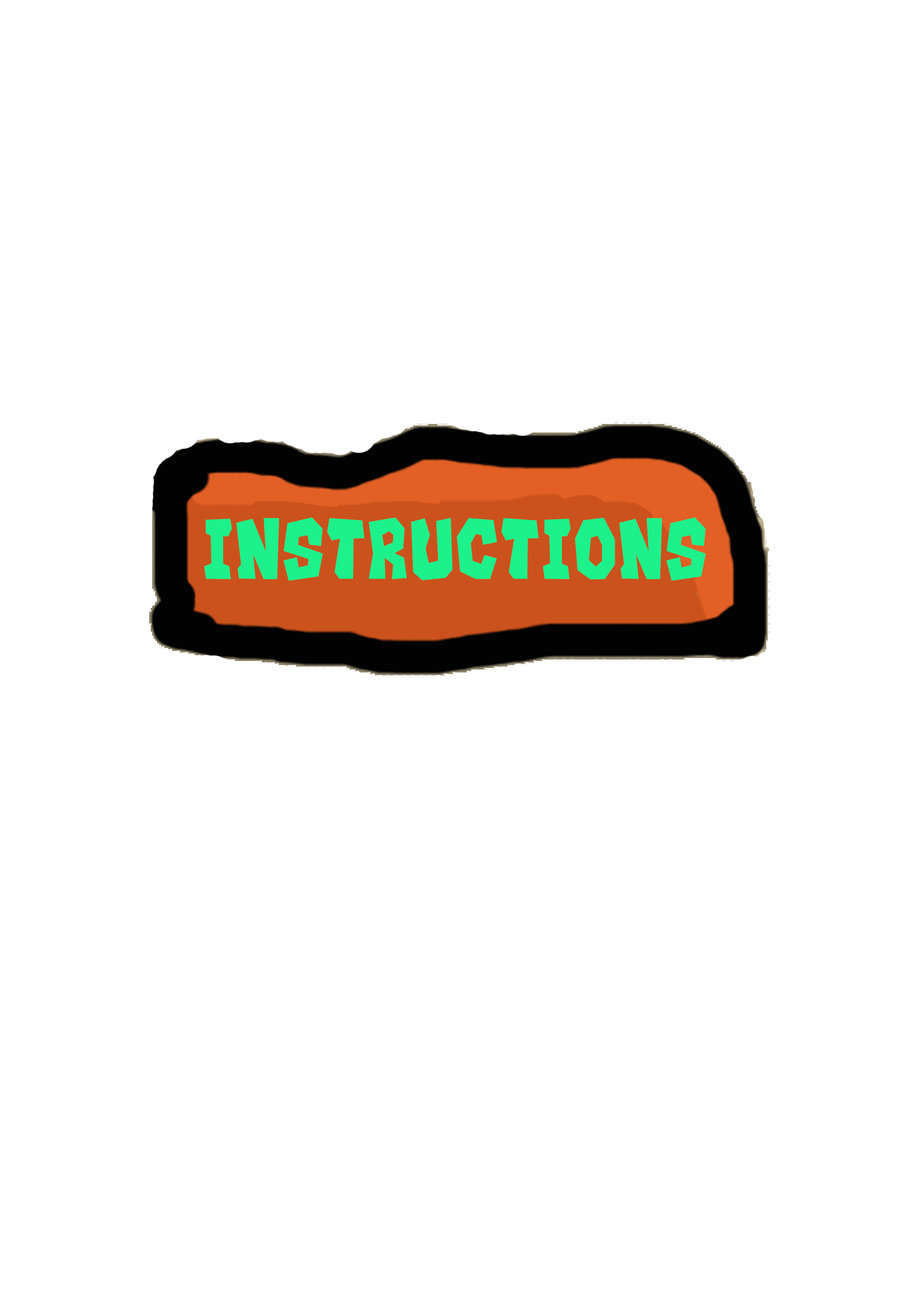
<style>
.page{position:relative;width:918px;height:1299px;background:#ffffff}
.page>*{position:absolute;margin:0}
.t1{font:77.1px "Rocks__G";color:#1df18b;text-transform:uppercase}
</style>
<div class="page">
<p class="t1" style="left:204px;top:517px;width:502px;height:64px">Instructions</p>
</div>
